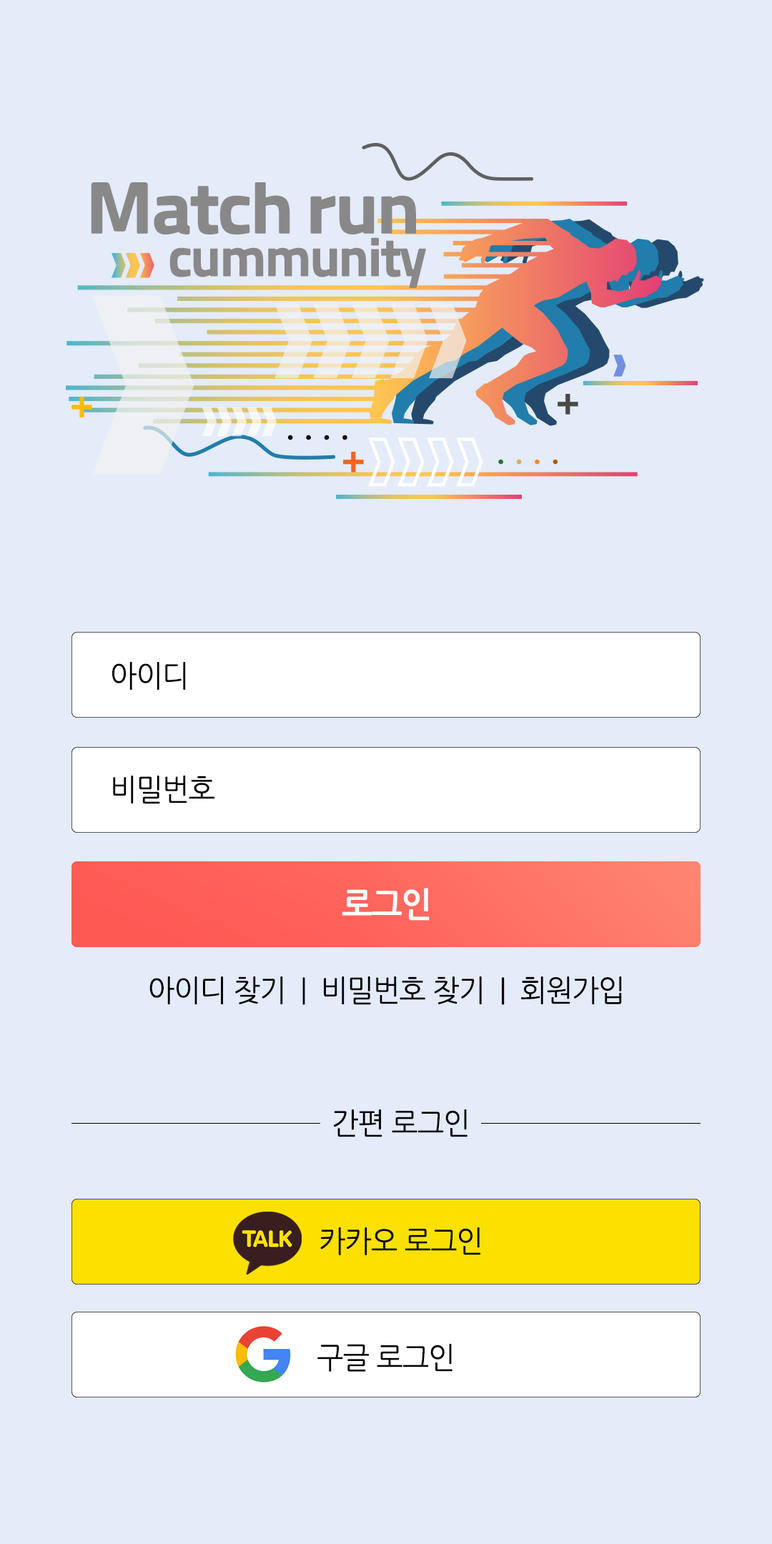
<style>
.page{position:relative;width:772px;height:1544px;background:#e4ebf9}
.page>*{position:absolute;margin:0}
.t1{font:30px "NanumGothic";letter-spacing:-0.025em;color:#000000;scale:0.95 1}
.t2{font:34.3px "NanumGothicBold";letter-spacing:-0.025em;color:#ffffff;scale:0.95 1}
</style>
<div class="page">
<p class="t1" style="left:112px;top:662px;width:74px;height:28px">아이디</p>
<p class="t1" style="left:113px;top:776px;width:101px;height:28px">비밀번호</p>
<p class="t2" style="left:342px;top:888px;width:88px;height:33px">로그인</p>
<p class="t1" style="left:149px;top:977px;width:473px;height:28px">아이디 찾기  |  비밀번호 찾기  |  회원가입</p>
<p class="t1" style="left:333px;top:1110px;width:135px;height:27px">간편 로그인</p>
<p class="t1" style="left:320px;top:1228px;width:160px;height:27px">카카오 로그인</p>
<p class="t1" style="left:317px;top:1344px;width:136px;height:28px">구글 로그인</p>
</div>
